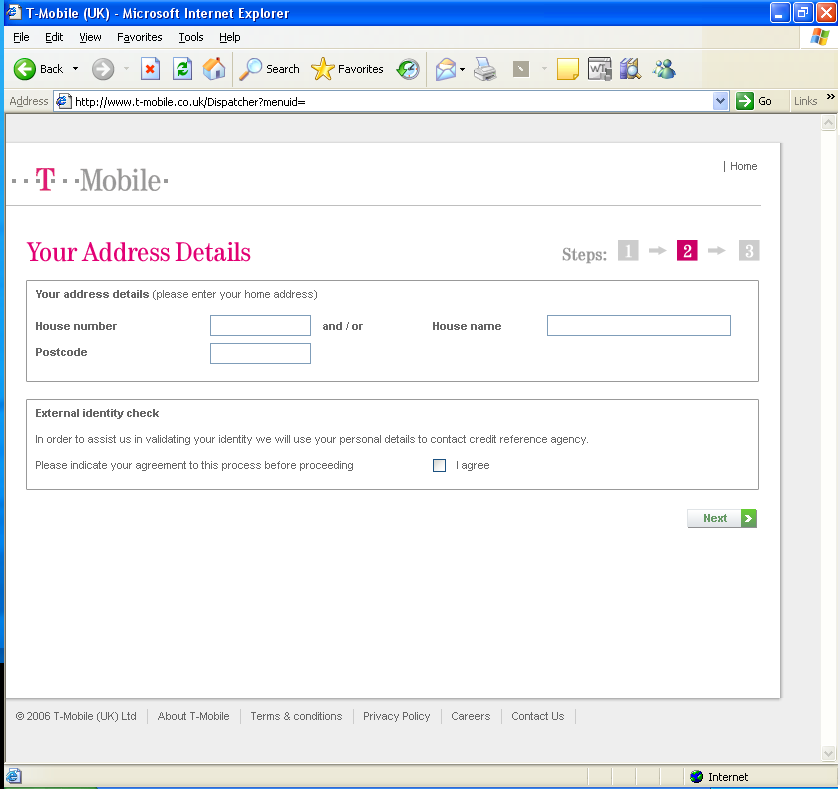
<style>
.page{position:relative;width:840px;height:789px;background:#ffffff}
.page>*{position:absolute;margin:0}
.t1{font:28px "Tele-Antiqua";color:#e20074}
.t2{font:18px "Tele-Antiqua";color:#ffffff;font-weight:bold}
.t3{font:18px "Tele-Antiqua";color:#999999;font-weight:bold}
.t4{font:11px "ArialMT";color:#666666}
.t5{font:11px "Arial-BoldMT";color:#666666}
.t6{font:11px/16px "Arial-BoldMT";color:#666666}
.t7{font:11px/26px "Arial-BoldMT";color:#666666}
.t8{font:11px/26px "ArialMT";color:#666666}
.t9{font:11px/16px "ArialMT";color:#666666}
.t10{font:11px "Arial-BoldMT";color:#669a65}
</style>
<div class="page">
<p class="t1" style="left:26px;top:242px;width:225px;height:20px">Your Address Details</p>
<p class="t2" style="left:625px;top:244px;width:7px;height:14px">1</p>
<p class="t2" style="left:683px;top:244px;width:9px;height:14px">2</p>
<p class="t2" style="left:745px;top:244px;width:9px;height:14px">3</p>
<p class="t3" style="left:562px;top:247px;width:45px;height:17px">Steps:</p>
<p class="t4" style="left:36px;top:290px;width:281px;height:66px"><span class="t5">Your address details </span>(please enter your home address)<br><span class="t6"><br>House number <br></span><span class="t7">Postcode</span></p>
<p class="t5" style="left:323px;top:322px;width:40px;height:8px">and / or</p>
<p class="t5" style="left:433px;top:322px;width:68px;height:8px">House name</p>
<p class="t8" style="left:36px;top:409px;width:552px;height:62px"><span class="t5">External identity check<br></span><span class="t9">In order to assist us in validating </span>your identity we will use your personal details to contact credit reference agency. <br>Please indicate your agreement to this process before proceeding</p>
<p class="t4" style="left:457px;top:461px;width:32px;height:10px">I agree</p>
<p class="t10" style="left:704px;top:514px;width:23px;height:8px">Next</p>
</div>
